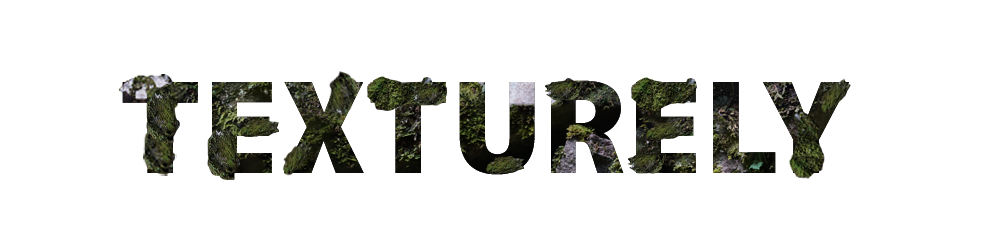
<style>
.page{position:relative;width:1000px;height:252px;background:#ffffff}
.page>*{position:absolute;margin:0}
.t1{font:124.4px "Mplus1p-Black"}
</style>
<div class="page">
<p class="t1" style="left:122px;top:80px;width:727px;height:95px">TEXTURELY</p>
</div>
